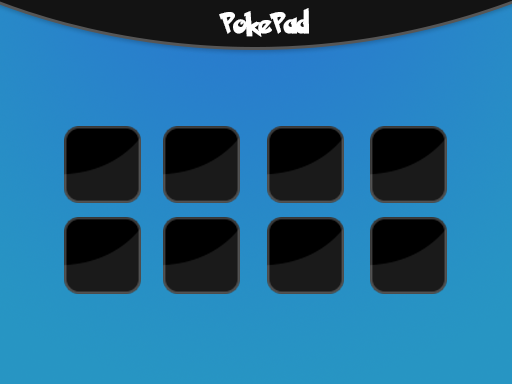
<style>
.page{position:relative;width:512px;height:384px}
.page>*{position:absolute;margin:0}
.t1{font:24px "PokemonSolidNormal";color:#ffffff}
</style>
<div class="page">
<p class="t1" style="left:219px;top:8px;width:90px;height:29px">PokePad</p>
</div>
